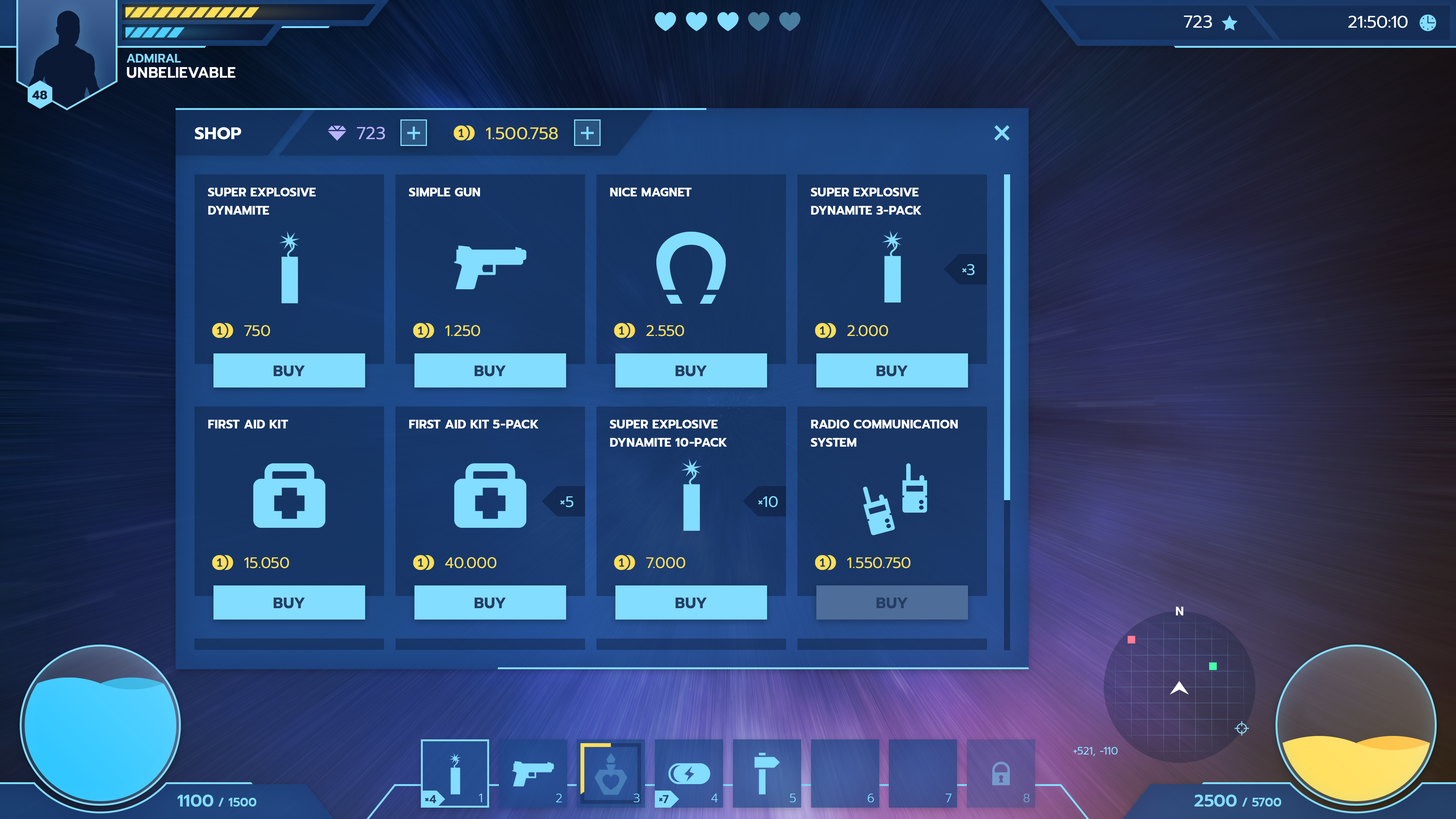
<style>
.page{position:relative;width:1456px;height:819px}
.page>*{position:absolute;margin:0}
.t1{font:17.4px "Prompt-Regular";color:#ffffff;text-transform:uppercase}
.t2{font:17.1px "Prompt-Regular";color:#ffffff;text-transform:uppercase}
.t3{font:15.2px/15.2px "Prompt-SemiBold";color:#ffffff;text-transform:uppercase}
.t4{font:12.1px/15.2px "Prompt-SemiBold";color:#83ddff;text-transform:uppercase}
.t5{font:12.1px "Prompt-Bold";color:#091a32;text-transform:uppercase}
.t6{font:17.1px "Prompt-Bold";color:#ffffff;text-transform:uppercase}
.t7{font:17.4px "Prompt-Regular";color:#bbb2ff;text-transform:uppercase}
.t8{font:17.1px "Prompt-Regular";color:#ffde58;text-transform:uppercase}
.t9{font:12.1px/18.2px "Prompt-Bold";color:#ffffff;text-transform:uppercase}
.t10{font:12.1px "Prompt-Bold";color:#ffffff;text-transform:uppercase}
.t11{font:15.2px "Prompt-Regular";color:#83ddff;text-transform:uppercase}
.t12{font:15.2px "Prompt-Regular";color:#ffde58;text-transform:uppercase}
.t13{font:15.2px "Prompt-Bold";color:#243e64;text-transform:uppercase}
.t14{font:12.1px "Prompt-SemiBold";color:#ffffff;text-transform:uppercase}
.t15{font:10.6px "Prompt-Regular";color:#83ddff;text-transform:uppercase}
.t16{font:12.1px "Prompt-SemiBold";color:#83ddff;text-transform:uppercase}
.t17{font:17.1px "Prompt-SemiBold";color:#83ddff;text-transform:uppercase}
.t18{font:11.4px "Prompt-SemiBold";color:#243e64;text-transform:uppercase}
.t19{font:12.1px "Prompt-Light";color:#83ddff;text-transform:uppercase}
.t20{font:12.1px "Prompt-Light";color:#74a2cc;text-transform:uppercase}
</style>
<div class="page">
<p class="t1" style="left:1184px;top:15px;width:28px;height:13px">723</p>
<p class="t2" style="left:1348px;top:16px;width:60px;height:12px">21:50:10</p>
<p class="t3" style="left:127px;top:54px;width:108px;height:24px"><span class="t4">Admiral<br></span>unbelievable</p>
<p class="t5" style="left:32px;top:91px;width:15px;height:8px">48</p>
<p class="t6" style="left:195px;top:127px;width:46px;height:13px">Shop</p>
<p class="t7" style="left:357px;top:127px;width:28px;height:13px">723</p>
<p class="t8" style="left:486px;top:127px;width:72px;height:13px">1.500.758</p>
<p class="t9" style="left:208px;top:188px;width:108px;height:27px">super explosive<br>dynamite</p>
<p class="t10" style="left:409px;top:188px;width:71px;height:8px">Simple gun</p>
<p class="t10" style="left:610px;top:188px;width:82px;height:8px">Nice magnet</p>
<p class="t9" style="left:811px;top:188px;width:111px;height:27px">super explosive<br>dynamite 3-pack</p>
<p class="t11" style="left:962px;top:264px;width:13px;height:11px">×3</p>
<p class="t12" style="left:244px;top:325px;width:26px;height:11px">750</p>
<p class="t12" style="left:445px;top:325px;width:35px;height:11px">1.250</p>
<p class="t12" style="left:646px;top:325px;width:38px;height:11px">2.550</p>
<p class="t12" style="left:847px;top:325px;width:41px;height:11px">2.000</p>
<p class="t13" style="left:273px;top:366px;width:32px;height:11px">Buy</p>
<p class="t13" style="left:474px;top:366px;width:32px;height:11px">Buy</p>
<p class="t13" style="left:675px;top:366px;width:32px;height:11px">Buy</p>
<p class="t13" style="left:876px;top:366px;width:32px;height:11px">Buy</p>
<p class="t10" style="left:208px;top:420px;width:80px;height:8px">first aid kit</p>
<p class="t10" style="left:409px;top:420px;width:130px;height:8px">first aid kit 5-pack</p>
<p class="t9" style="left:610px;top:420px;width:117px;height:27px">super explosive<br>dynamite 10-pack</p>
<p class="t9" style="left:811px;top:420px;width:147px;height:27px">Radio communication<br>system</p>
<p class="t11" style="left:560px;top:496px;width:13px;height:11px">×5</p>
<p class="t11" style="left:758px;top:496px;width:20px;height:11px">×10</p>
<p class="t12" style="left:244px;top:557px;width:45px;height:11px">15.050</p>
<p class="t12" style="left:445px;top:557px;width:52px;height:11px">40.000</p>
<p class="t12" style="left:646px;top:557px;width:40px;height:11px">7.000</p>
<p class="t12" style="left:847px;top:557px;width:64px;height:11px">1.550.750</p>
<p class="t13" style="left:273px;top:598px;width:32px;height:11px">Buy</p>
<p class="t13" style="left:474px;top:598px;width:32px;height:11px">Buy</p>
<p class="t13" style="left:675px;top:598px;width:32px;height:11px">Buy</p>
<p class="t13" style="left:876px;top:598px;width:32px;height:11px">Buy</p>
<p class="t14" style="left:1176px;top:607px;width:7px;height:8px">N</p>
<p class="t15" style="left:1073px;top:747px;width:45px;height:9px">+521, -110</p>
<p class="t16" style="left:177px;top:794px;width:79px;height:13px"><span class="t17">1100</span> / 1500</p>
<p class="t18" style="left:425px;top:795px;width:11px;height:8px">×4</p>
<p class="t19" style="left:479px;top:794px;width:3px;height:8px">1</p>
<p class="t19" style="left:556px;top:794px;width:6px;height:8px">2</p>
<p class="t19" style="left:634px;top:794px;width:6px;height:8px">3</p>
<p class="t18" style="left:659px;top:795px;width:9px;height:8px">×7</p>
<p class="t19" style="left:711px;top:794px;width:7px;height:8px">4</p>
<p class="t19" style="left:790px;top:794px;width:6px;height:8px">5</p>
<p class="t19" style="left:868px;top:794px;width:6px;height:8px">6</p>
<p class="t19" style="left:946px;top:794px;width:6px;height:8px">7</p>
<p class="t20" style="left:1023px;top:794px;width:7px;height:8px">8</p>
<p class="t16" style="left:1194px;top:794px;width:87px;height:13px"><span class="t17">2500</span> / 5700</p>
</div>
